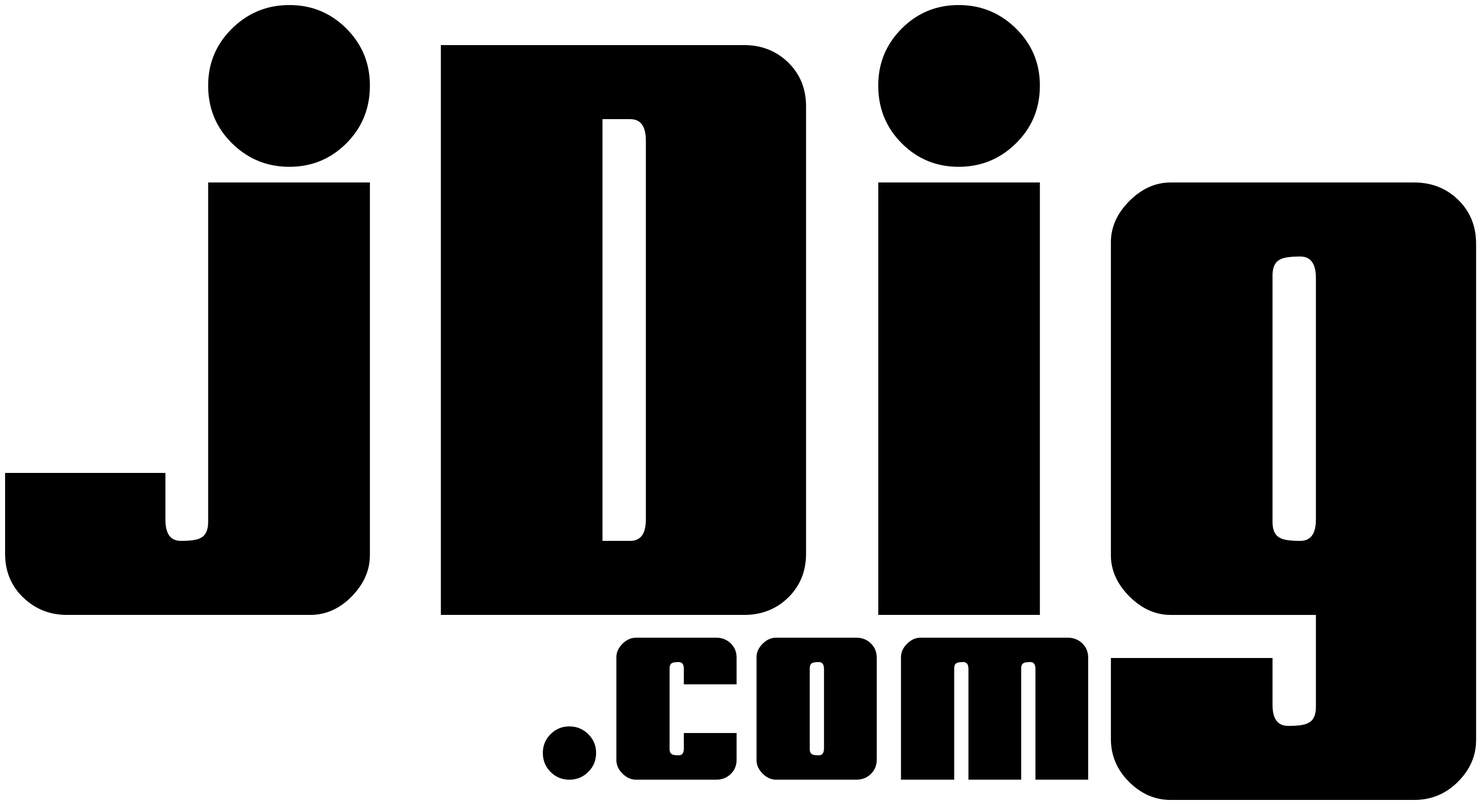
<style>
.page{position:relative;width:1482px;height:805px;background:#000000}
.page>*{position:absolute;margin:0}
.t1{font:711.6px "MyPuma";color:#000000}
.t2{font:233.7px "MyPuma";color:#000000}
</style>
<div class="page">
<p class="t1" style="left:5px;top:5px;width:1471px;height:795px">jDig</p>
<p class="t2" style="left:543px;top:637px;width:545px;height:142px">.com</p>
</div>
